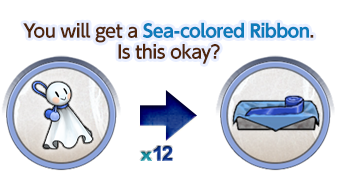
<style>
.page{position:relative;width:347px;height:177px;background:#ffffff}
.page>*{position:absolute;margin:0}
.t1{font:18px/21px "UDShinGoPro-Bold";letter-spacing:-0.04em;color:#0d7bba}
.t2{font:18px/21px "UDShinGoPro-DeBold";letter-spacing:-0.04em;color:#50260d}
</style>
<div class="page">
<p class="t1" style="left:23px;top:22px;width:291px;height:42px;text-align:center"><span class="t2">You will get a </span>Sea-colored Ribbon<span class="t2">.<br>Is this okay?</span></p>
</div>
